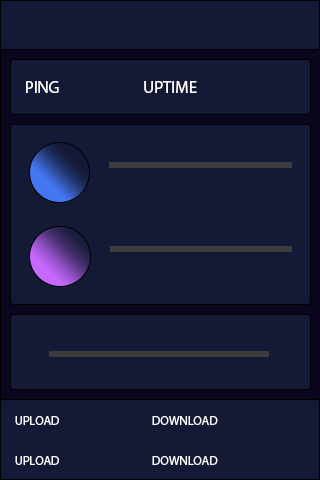
<style>
.page{position:relative;width:320px;height:480px;background:#141935}
.page>*{position:absolute;margin:0}
.t1{font:16.7px "MyriadPro-Regular";color:#ffffff}
.t2{font:12.5px "MyriadPro-Regular";color:#ffffff}
</style>
<div class="page">
<p class="t1" style="left:26px;top:81px;width:33px;height:12px">PING</p>
<p class="t1" style="left:144px;top:81px;width:53px;height:12px">UPTIME</p>
<p class="t2" style="left:15px;top:416px;width:44px;height:9px">UPLOAD</p>
<p class="t2" style="left:152px;top:416px;width:66px;height:9px">DOWNLOAD</p>
<p class="t2" style="left:15px;top:456px;width:44px;height:9px">UPLOAD</p>
<p class="t2" style="left:152px;top:456px;width:66px;height:9px">DOWNLOAD</p>
</div>
